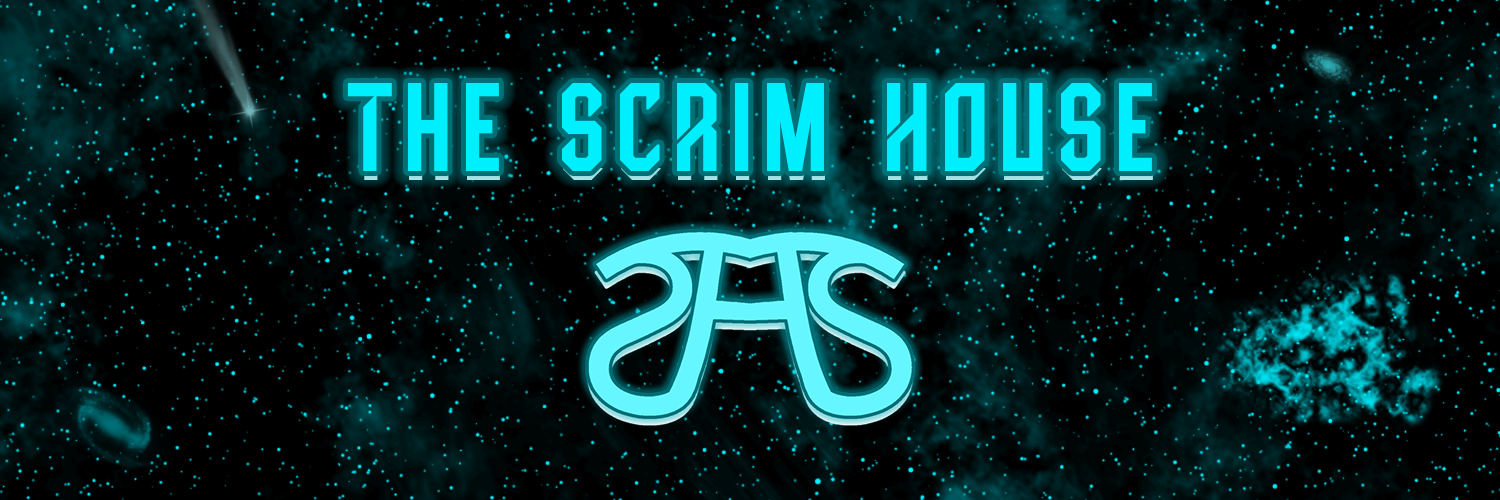
<style>
.page{position:relative;width:1500px;height:500px;background:#000000}
.page>*{position:absolute;margin:0}
.t1{font:125px "HighJersey";letter-spacing:0.1em;color:#00efff}
</style>
<div class="page">
<p class="t1" style="left:347px;top:83px;width:805px;height:88px">The SCRim HouSe</p>
</div>
